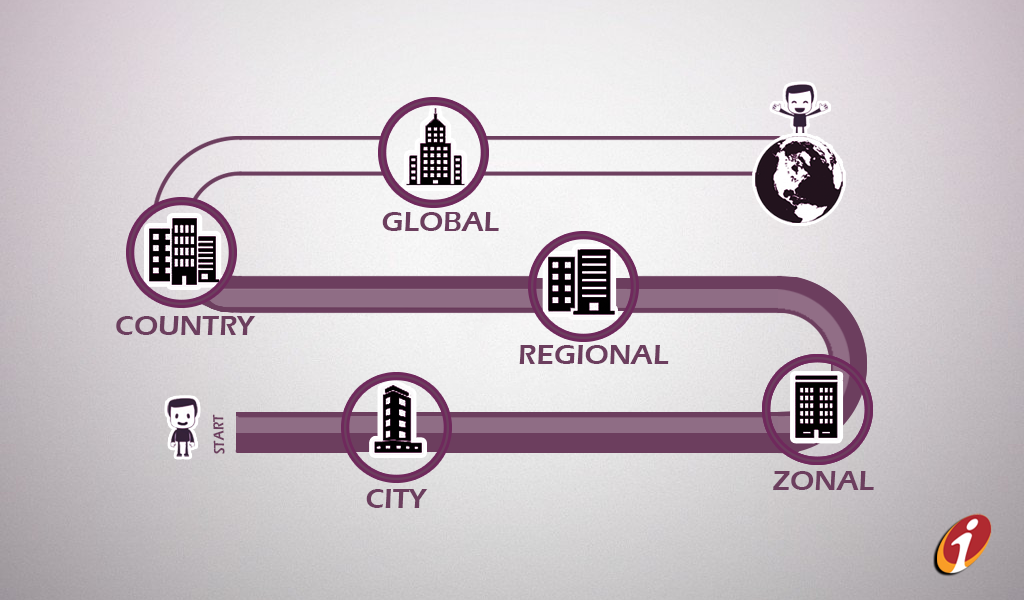
<style>
.page{position:relative;width:1024px;height:600px}
.page>*{position:absolute;margin:0}
.t1{font:28.8px "ErasITC-Demi";color:#6c3e5e}
.t2{font:14.9px "ErasITC-Demi";color:#6c3e5e;scale:0.88 1}
</style>
<div class="page">
<p class="t1" style="left:382px;top:212px;width:117px;height:19px">GLOBAL</p>
<p class="t1" style="left:116px;top:316px;width:140px;height:19px">COUNTRY</p>
<p class="t1" style="left:519px;top:345px;width:150px;height:19px">REGIONAL</p>
<p class="t2" style="left:212px;top:414px;width:13px;height:40px;rotate:-91deg">START</p>
<p class="t1" style="left:773px;top:471px;width:101px;height:19px">ZONAL</p>
<p class="t1" style="left:366px;top:489px;width:62px;height:19px">CITY</p>
</div>
